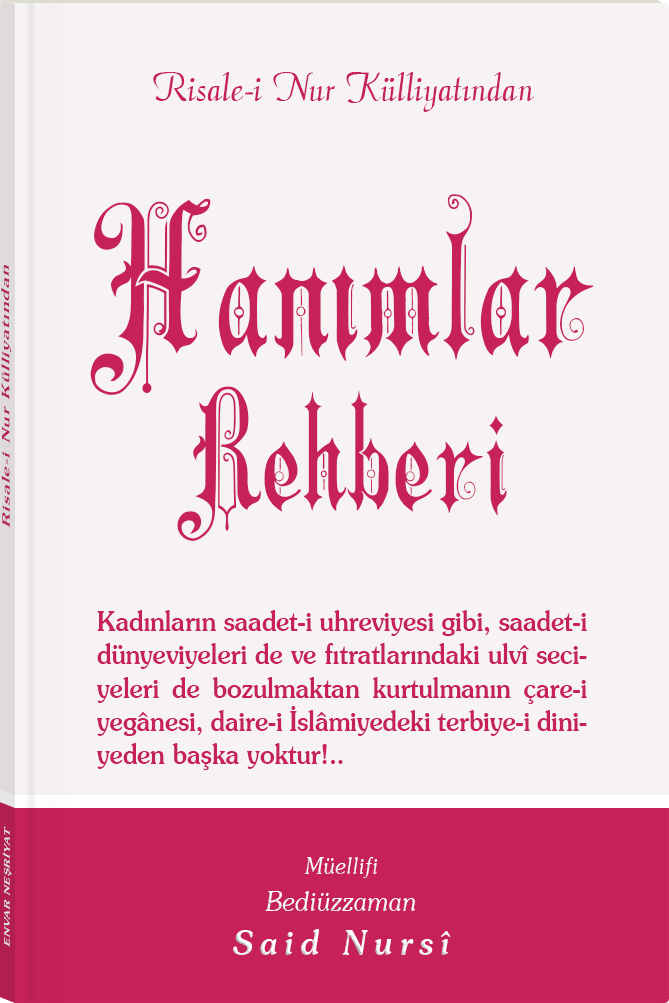
<style>
.page{position:relative;width:669px;height:1003px;background:#f7f3f3}
.page>*{position:absolute;margin:0}
.t1{font:45.3px "Barla © 072 Aria ScriptScriptSSi";color:#c6215b;scale:0.94 1}
.t2{font:203.1px/181.2px "Barla © 001 Liva Nur";letter-spacing:-0.001em;color:#c6215b;scale:0.92 1}
.t3{font:158.9px/156.2px "Barla © 001 Liva Nur";letter-spacing:-0.001em;color:#c6215b;scale:0.92 1}
.t4{font:11.4px "Souvenir-Medium";letter-spacing:0.08em;color:#c6215b;scale:1.65 1}
.t5{font:26.8px/33.2px "Souvenir-Medium";color:#c6215b;scale:0.92 1}
.t6{font:8.3px "Souvenir-Medium";letter-spacing:0.08em;color:#e5e5e5;scale:1.43 1}
.t7{font:27.1px/37.8px "Souvenir-LightItalic";color:#ffffff;scale:0.92 1}
.t8{font:22.8px/39.8px "Souvenir-LightItalic";color:#ffffff;scale:0.92 1}
.t9{font:33.9px/43.8px "Souvenir-MediumItalic";letter-spacing:0.2em;color:#ffffff;scale:0.92 1}
</style>
<div class="page">
<p class="t1" style="left:153px;top:72px;width:381px;height:40px">Risale-i Nur Külliyatından</p>
<p class="t2" style="left:90px;top:194px;width:504px;height:347px;text-align:center">Hanımlar<br><span class="t3">Rehberi</span></p>
<p class="t4" style="left:1px;top:265px;width:10px;height:263px;rotate:-90deg">Risale-i Nur Külliyatından</p>
<p class="t5" style="left:97px;top:610px;width:490px;height:160px;text-align:justify">Kadınların saadet-i uhreviyesi gibi, saadet-i dünyeviyeleri de ve fıtratlarındaki ulvî seciyeleri de bozulmaktan kurtulmanın çare-i yegânesi, daire-i İslâmiyedeki terbiye-i diniyeden başka yoktur!..</p>
<p class="t6" style="left:2px;top:826px;width:10px;height:121px;rotate:-90deg">ENVAR NEŞRİYAT</p>
<p class="t7" style="left:233px;top:857px;width:218px;height:98px;text-align:center"><span class="t8">Müellifi<br></span>Bediüzzaman<br><span class="t9">Said Nursî</span></p>
</div>
